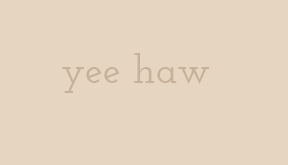
<style>
.page{position:relative;width:288px;height:165px;background:#e6d5c1}
.page>*{position:absolute;margin:0}
.t1{font:40.1px "JosefinSlab-SemiBold";color:#c6b299}
</style>
<div class="page">
<p class="t1" style="left:62px;top:53px;width:148px;height:40px">yee haw</p>
</div>
